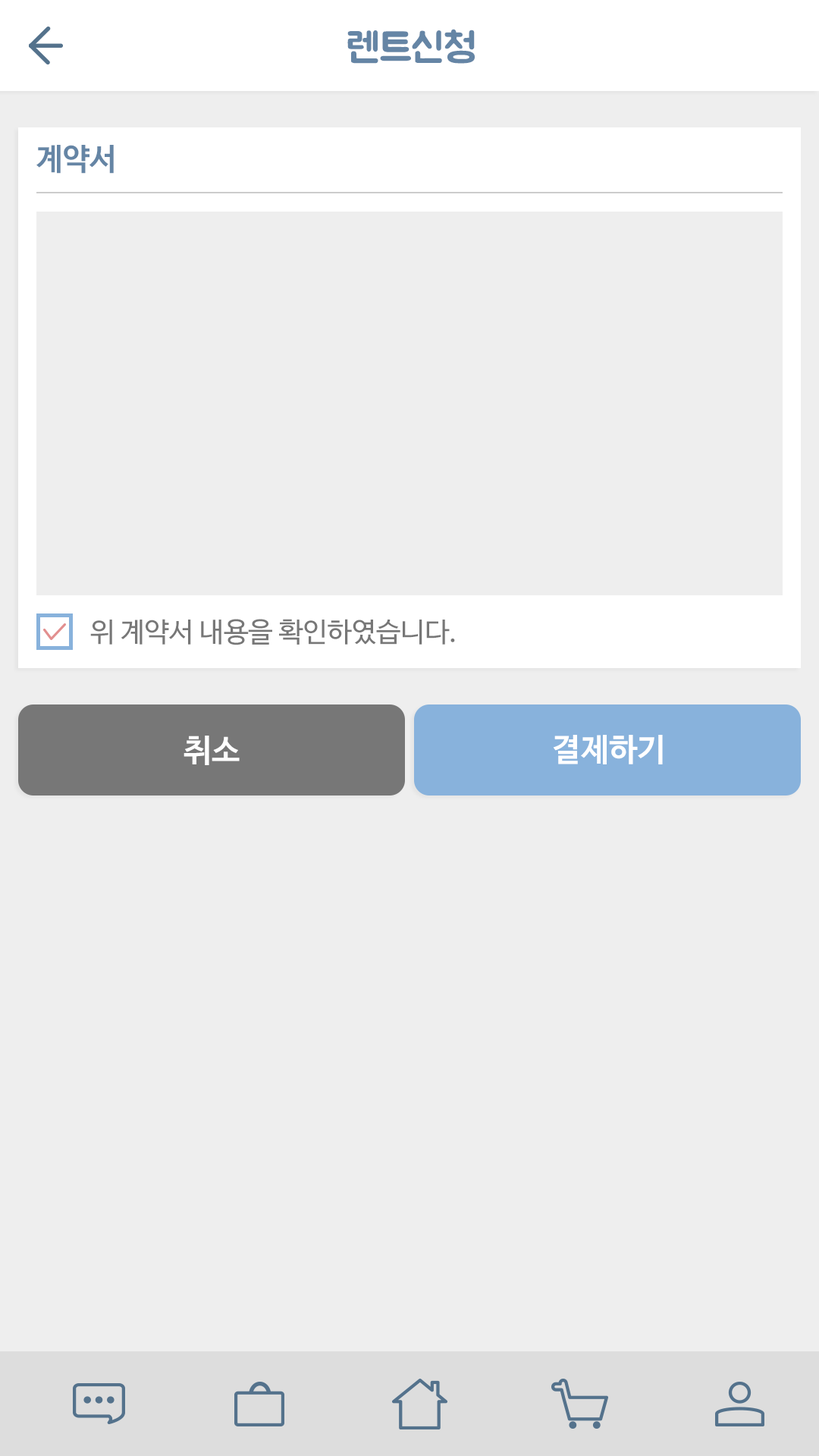
<style>
.page{position:relative;width:819px;height:1456px;background:#eeeeee}
.page>*{position:absolute;margin:0}
.t1{font:40.9px "BMJUA";color:#6585a5}
.t2{font:30.3px "NanumBarunGothicBold";color:#6585a5}
.t3{font:27.3px "NanumBarunGothic";color:#777777}
.t4{font:31.8px "NanumBarunGothicBold";color:#ffffff}
</style>
<div class="page">
<p class="t1" style="left:347px;top:29px;width:128px;height:35px">렌트신청</p>
<p class="t2" style="left:36px;top:145px;width:78px;height:29px">계약서</p>
<p class="t3" style="left:90px;top:619px;width:365px;height:26px">위 계약서 내용을 확인하였습니다.</p>
<p class="t4" style="left:184px;top:736px;width:56px;height:29px">취소</p>
<p class="t4" style="left:553px;top:735px;width:110px;height:29px">결제하기</p>
</div>
